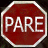
<style>
.page{position:relative;width:48px;height:48px}
.page>*{position:absolute;margin:0}
.t1{font:20px "Tahoma";color:#ebecec;text-transform:uppercase;scale:0.85 1}
</style>
<div class="page">
<p class="t1" style="left:5px;top:16px;width:39px;height:16px">PARE</p>
</div>
